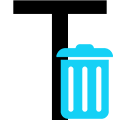
<style>
.page{position:relative;width:120px;height:120px;background:#ffffff}
.page>*{position:absolute;margin:0}
.t1{font:172px "AcuminConcept-Regular";color:#000000}
</style>
<div class="page">
<p class="t1" style="left:13px;top:0px;width:94px;height:120px">T</p>
</div>
